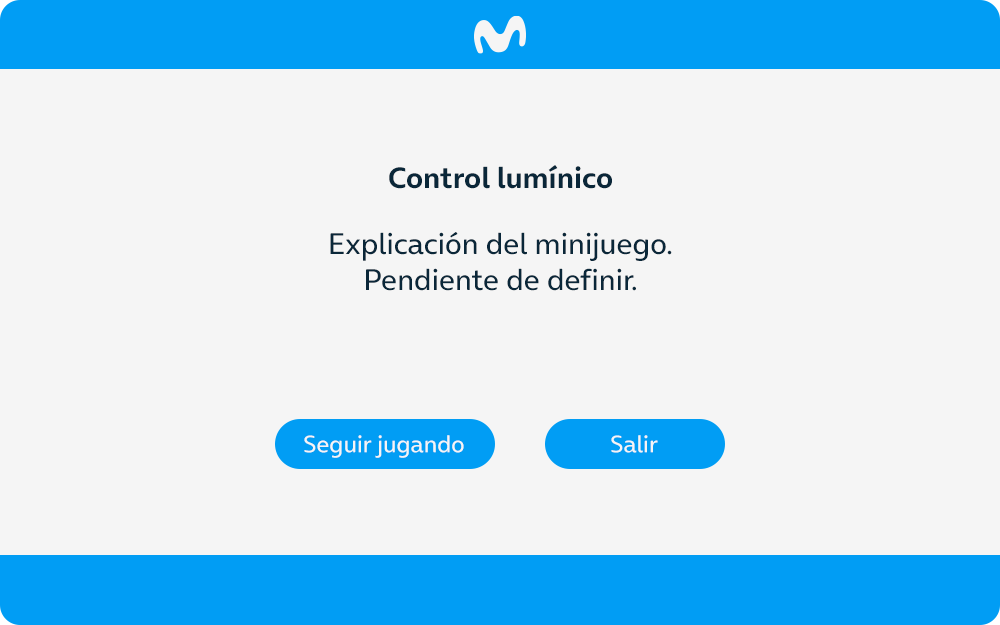
<style>
.page{position:relative;width:1000px;height:625px;background:#f5f5f5}
.page>*{position:absolute;margin:0}
.t1{font:30px "OnAir-Bold";color:#0a2739}
.t2{font:30px "OnAir-Regular";color:#0a2739}
.t3{font:24px "OnAir-Regular";color:#f5f5f5}
</style>
<div class="page">
<p class="t1" style="left:389px;top:165px;width:223px;height:24px">Control lumínico</p>
<p class="t2" style="left:330px;top:232px;width:342px;height:59px;text-align:center">Explicación del minijuego.<br>Pendiente de definir.</p>
<p class="t3" style="left:304px;top:435px;width:160px;height:23px">Seguir jugando</p>
<p class="t3" style="left:611px;top:435px;width:47px;height:18px">Salir</p>
</div>
